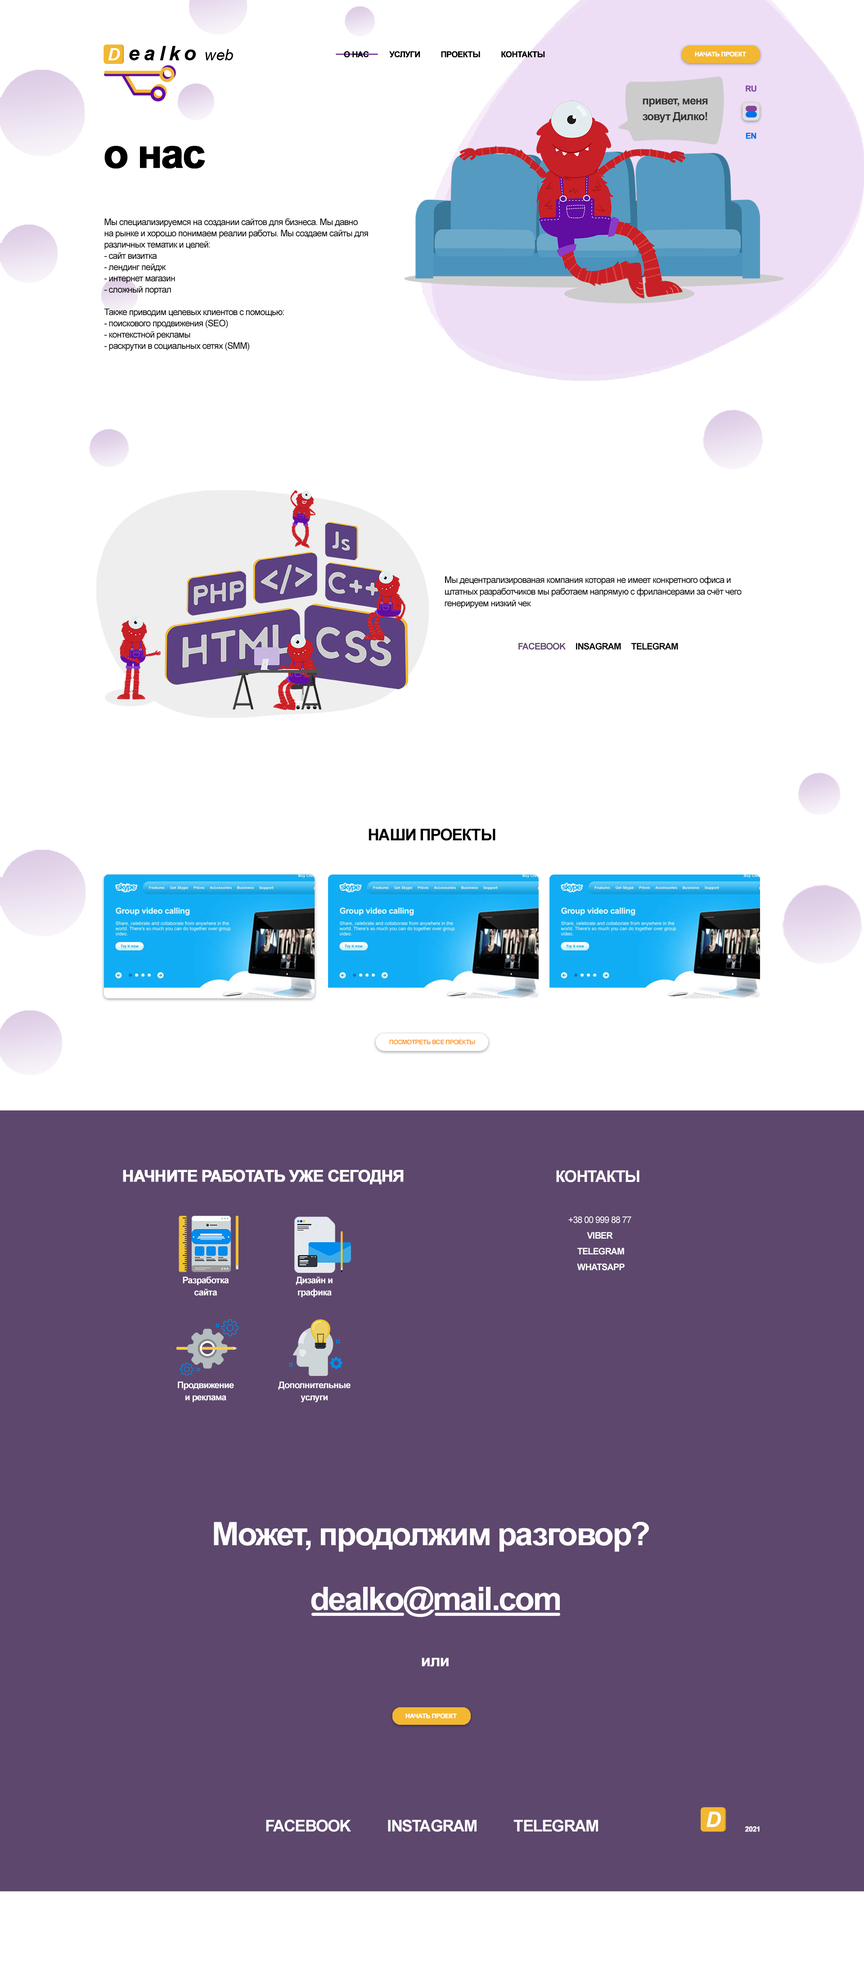
<style>
.page{position:relative;width:864px;height:1971px;background:#ffffff}
.page>*{position:absolute;margin:0}
.t1{font:8.1px "Arial-BoldMT";letter-spacing:-0.05em;color:#000000;font-weight:bold}
.t2{font:6.3px "Arial-BoldMT";letter-spacing:-0.05em;color:#ffffff;font-weight:bold}
.t3{font:8.1px "Arial-BoldMT";letter-spacing:-0.05em;color:#8544a2;font-weight:bold}
.t4{font:11.2px/15.8px "Arial-BoldMT";letter-spacing:-0.05em;color:#323232}
.t5{font:8.1px "Arial-BoldMT";letter-spacing:-0.05em;color:#0071e3;font-weight:bold}
.t6{font:40.5px "Arial-BoldMT";letter-spacing:-0.05em;color:#000000;font-weight:bold}
.t7{font:9px/11.2px "ArialMT";letter-spacing:-0.05em;color:#000000}
.t8{font:9px/11.7px "ArialMT";letter-spacing:-0.05em;color:#000000}
.t9{font:9px "Arial-BoldMT";letter-spacing:-0.05em;color:#000000}
.t10{font:9px "Arial-BoldMT";letter-spacing:-0.05em;color:#5d476d}
.t11{font:16.2px "Arial-BoldMT";letter-spacing:-0.05em;color:#000000}
.t12{font:6.3px "Arial-BoldMT";letter-spacing:-0.05em;color:#ff9a2e}
.t13{font:16.2px "Arial-BoldMT";letter-spacing:-0.05em;color:#ffffff;font-weight:bold}
.t14{font:16.2px "Arial-BoldMT";letter-spacing:-0.05em;color:#ffffff}
.t15{font:9px/15.8px "Arial-BoldMT";letter-spacing:-0.05em;color:#fefefe}
.t16{font:9px/15.8px "ArialMT";letter-spacing:-0.05em;color:#fefefe}
.t17{font:9px/12.2px "Arial-BoldMT";letter-spacing:-0.05em;color:#ffffff}
.t18{font:32.4px "Arial-BoldMT";letter-spacing:-0.05em;color:#fefefe}
.t19{font:16.2px "Arial-BoldMT";letter-spacing:-0.05em;color:#fefefe}
.t20{font:7.2px "Arial-BoldMT";letter-spacing:-0.05em;color:#ffffff;font-weight:bold}
</style>
<div class="page">
<p class="t1" style="left:344px;top:51px;width:201px;height:7px">О НАС          УСЛУГИ          ПРОЕКТЫ          КОНТАКТЫ</p>
<p class="t2" style="left:695px;top:51px;width:51px;height:6px">НАЧАТЬ ПРОЕКТ</p>
<p class="t3" style="left:746px;top:86px;width:10px;height:6px">RU</p>
<p class="t4" style="left:642px;top:98px;width:66px;height:25px;text-align:center">привет, меня<br>зовут Дилко!</p>
<p class="t5" style="left:746px;top:133px;width:10px;height:6px">EN</p>
<p class="t6" style="left:104px;top:146px;width:101px;height:23px">о нас</p>
<p class="t7" style="left:104px;top:218px;width:264px;height:133px">Мы специализируемся на создании сайтов для бизнеса. Мы давно на рынке и хорошо понимаем реалии работы. Мы создаем сайты для различных тематик и целей:<br>- сайт визитка<br>- лендинг пейдж<br>- интернет магазин<br>- сложный портал<br><br>Также приводим целевых клиентов с помощью:<br>- поискового продвижения (SEO)<br>- контекстной рекламы<br>- раскрутки в социальных сетях (SMM)</p>
<p class="t8" style="left:445px;top:576px;width:297px;height:32px">Мы децентрализированая компания которая не имеет конкретного офиса и штатных разработчиков мы работаем напрямую с фрилансерами за счёт чего генерируем низкий чек</p>
<p class="t9" style="left:518px;top:643px;width:160px;height:7px"><span class="t10">FACEBOOK</span>     INSAGRAM     TELEGRAM</p>
<p class="t11" style="left:369px;top:828px;width:126px;height:13px">НАШИ ПРОЕКТЫ</p>
<p class="t12" style="left:389px;top:1039px;width:86px;height:5px">ПОСМОТРЕТЬ ВСЕ ПРОЕКТЫ</p>
<p class="t13" style="left:123px;top:1169px;width:281px;height:15px">НАЧНИТЕ РАБОТАТЬ УЖЕ СЕГОДНЯ</p>
<p class="t14" style="left:556px;top:1170px;width:83px;height:12px">КОНТАКТЫ</p>
<p class="t15" style="left:568px;top:1216px;width:63px;height:54px;text-align:center"><span class="t16">+38 00 999 88 77 <br></span>VIBER <br>TELEGRAM<br>WHATSAPP</p>
<p class="t17" style="left:183px;top:1276px;width:46px;height:20px;text-align:center">Разработка<br>сайта</p>
<p class="t17" style="left:296px;top:1276px;width:37px;height:21px;text-align:center">Дизайн и<br>графика</p>
<p class="t17" style="left:178px;top:1381px;width:56px;height:21px;text-align:center">Продвижение<br>и реклама</p>
<p class="t17" style="left:278px;top:1381px;width:73px;height:21px;text-align:center">Дополнительные<br>услуги</p>
<p class="t18" style="left:214px;top:1521px;width:435px;height:31px">Может, продолжим разговор?</p>
<p class="t18" style="left:311px;top:1586px;width:249px;height:31px">dealko@mail.com</p>
<p class="t19" style="left:422px;top:1657px;width:27px;height:9px">или</p>
<p class="t2" style="left:405px;top:1713px;width:52px;height:5px">НАЧАТЬ ПРОЕКТ</p>
<p class="t19" style="left:266px;top:1819px;width:332px;height:13px">FACEBOOK          INSTAGRAM          TELEGRAM</p>
<p class="t20" style="left:745px;top:1826px;width:15px;height:6px">2021</p>
</div>
